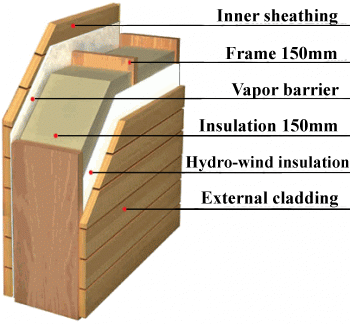
<style>
.page{position:relative;width:350px;height:324px;background:#ffffff}
.page>*{position:absolute;margin:0}
.t1{font:18px "TimesNewRomanPS-BoldMT";color:#010101}
.t2{font:18px "TimesNewRomanPS-BoldMT";color:#000000}
.t3{font:17px "TimesNewRomanPS-BoldMT";color:#000000}
</style>
<div class="page">
<p class="t1" style="left:216px;top:9px;width:122px;height:16px">Inner sheathing</p>
<p class="t2" style="left:225px;top:46px;width:112px;height:14px">Frame 150mm</p>
<p class="t2" style="left:231px;top:83px;width:108px;height:16px">Vapor barrier</p>
<p class="t2" style="left:199px;top:119px;width:139px;height:13px">Insulation 150mm</p>
<p class="t3" style="left:185px;top:156px;width:164px;height:16px">Hydro-wind insulation</p>
<p class="t2" style="left:201px;top:191px;width:137px;height:17px">External cladding</p>
</div>
